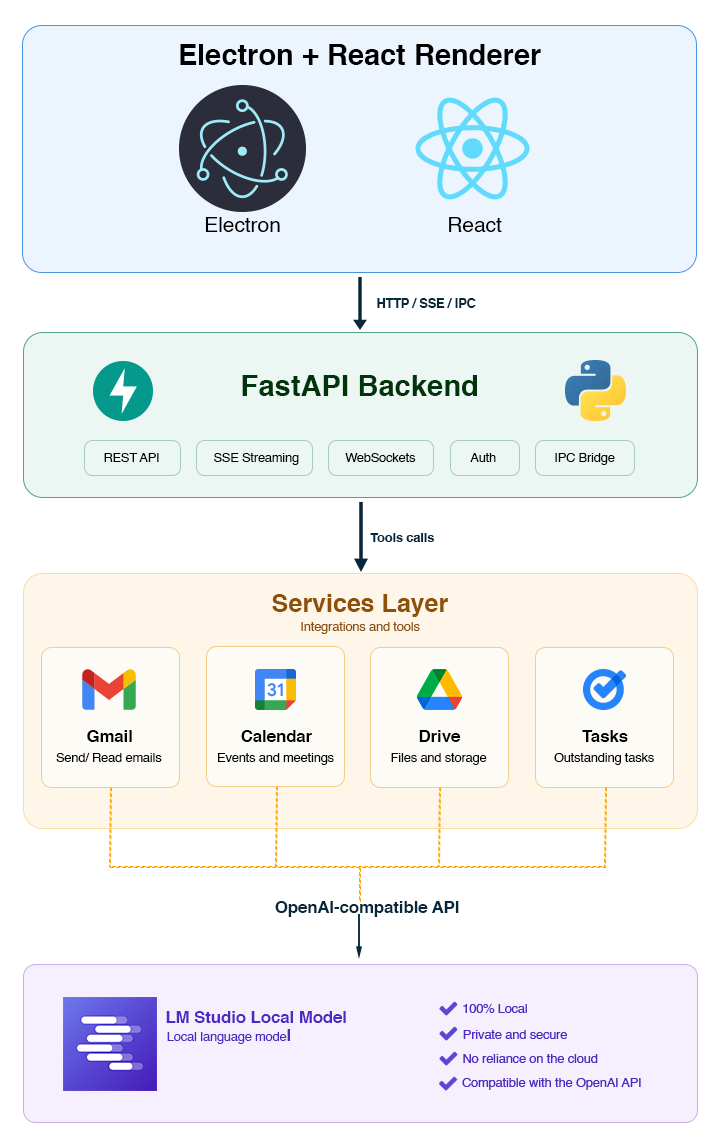
<style>
.page{position:relative;width:720px;height:1148px;background:#ffffff}
.page>*{position:absolute;margin:0}
.t1{font:29px "Helvetica-Bold";color:#000000}
.t2{font:20.8px "Helvetica";color:#000000}
.t3{font:12.5px "Helvetica-Bold";color:#05283d}
.t4{font:29.2px "Helvetica-Bold";color:#00340b}
.t5{font:12.5px "Helvetica";color:#000000}
.t6{font:12.4px "Helvetica-Bold";color:#05283d}
.t7{font:25px "Helvetica-Bold";color:#8c5104}
.t8{font:12.5px "Helvetica";color:#8c5104}
.t9{font:16.7px "Helvetica-Bold";color:#000000}
.t10{font:16.7px "Helvetica-Bold";color:#05283d}
.t11{font:16.7px "Helvetica-Bold";color:#4c2ac1}
.t12{font:12.5px "Helvetica";color:#4c2ac1}
</style>
<div class="page">
<p class="t1" style="left:180px;top:44px;width:361px;height:21px">Electron + React Renderer</p>
<p class="t2" style="left:205px;top:217px;width:75px;height:15px">Electron</p>
<p class="t2" style="left:449px;top:217px;width:53px;height:15px">React</p>
<p class="t3" style="left:377px;top:298px;width:99px;height:10px">HTTP / SSE / IPC</p>
<p class="t4" style="left:242px;top:375px;width:235px;height:21px">FastAPI Backend</p>
<p class="t5" style="left:104px;top:453px;width:55px;height:9px">REST API</p>
<p class="t5" style="left:214px;top:453px;width:85px;height:12px">SSE Streaming</p>
<p class="t5" style="left:345px;top:453px;width:71px;height:9px">WebSockets</p>
<p class="t5" style="left:470px;top:453px;width:26px;height:9px">Auth</p>
<p class="t5" style="left:555px;top:453px;width:60px;height:12px">IPC Bridge</p>
<p class="t6" style="left:370px;top:533px;width:64px;height:9px">Tools calls</p>
<p class="t7" style="left:272px;top:594px;width:176px;height:23px">Services Layer</p>
<p class="t8" style="left:301px;top:622px;width:119px;height:12px">Integrations and tools</p>
<p class="t9" style="left:87px;top:730px;width:45px;height:12px">Gmail</p>
<p class="t9" style="left:241px;top:730px;width:71px;height:12px">Calendar</p>
<p class="t9" style="left:419px;top:730px;width:42px;height:12px">Drive</p>
<p class="t9" style="left:582px;top:730px;width:46px;height:12px">Tasks</p>
<p class="t5" style="left:56px;top:753px;width:106px;height:9px">Send/ Read emails</p>
<p class="t5" style="left:218px;top:753px;width:116px;height:12px">Events and meetings</p>
<p class="t5" style="left:391px;top:753px;width:96px;height:12px">Files and storage</p>
<p class="t5" style="left:554px;top:753px;width:100px;height:12px">Outstanding tasks</p>
<p class="t10" style="left:275px;top:901px;width:184px;height:16px">OpenAI-compatible API</p>
<p class="t11" style="left:166px;top:1011px;width:180px;height:12px">LM Studio Local Model</p>
<p class="t12" style="left:167px;top:1029px;width:123px;height:15px">Local language mode<span class="t11">l</span></p>
</div>
